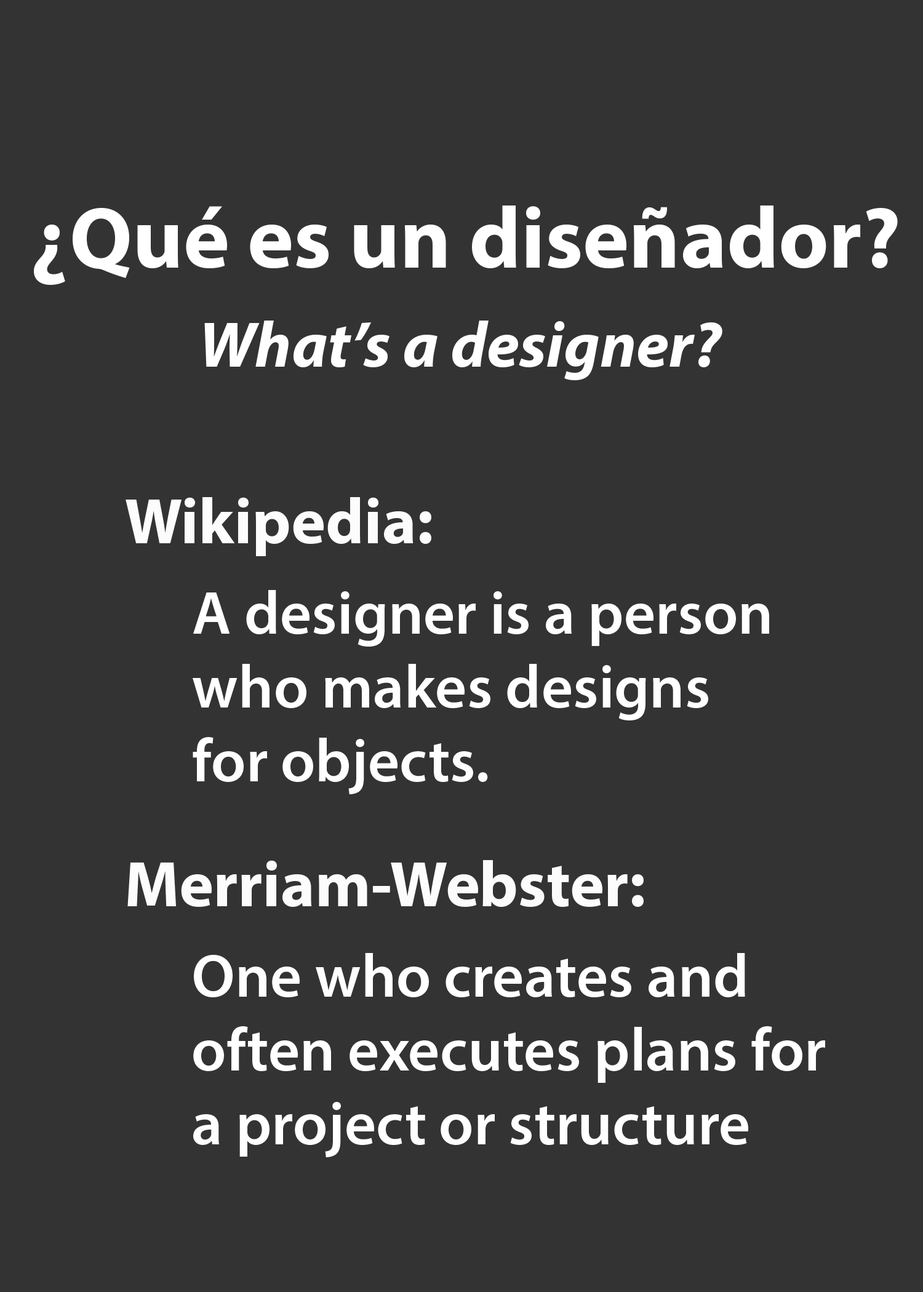
<style>
.page{position:relative;width:923px;height:1292px;background:#333333}
.page>*{position:absolute;margin:0}
.t1{font:87.4px "MyriadPro-Bold";color:#ffffff}
.t2{font:65px "MyriadPro-BoldIt";color:#ffffff}
.t3{font:65px "MyriadPro-Bold";color:#fcfcfc}
.t4{font:61.5px "MyriadPro-Semibold";color:#ffffff}
</style>
<div class="page">
<p class="t1" style="left:34px;top:205px;width:864px;height:80px">¿Qué es un diseñador?</p>
<p class="t2" style="left:204px;top:321px;width:518px;height:59px">What’s a designer?</p>
<p class="t3" style="left:126px;top:497px;width:305px;height:59px">Wikipedia:</p>
<p class="t4" style="left:193px;top:590px;width:576px;height:204px">A designer is a person <br>who makes designs <br>for objects.</p>
<p class="t3" style="left:127px;top:860px;width:517px;height:48px">Merriam-Webster:</p>
<p class="t4" style="left:193px;top:953px;width:632px;height:204px">One who creates and<br>often executes plans for<br>a project or structure</p>
</div>
